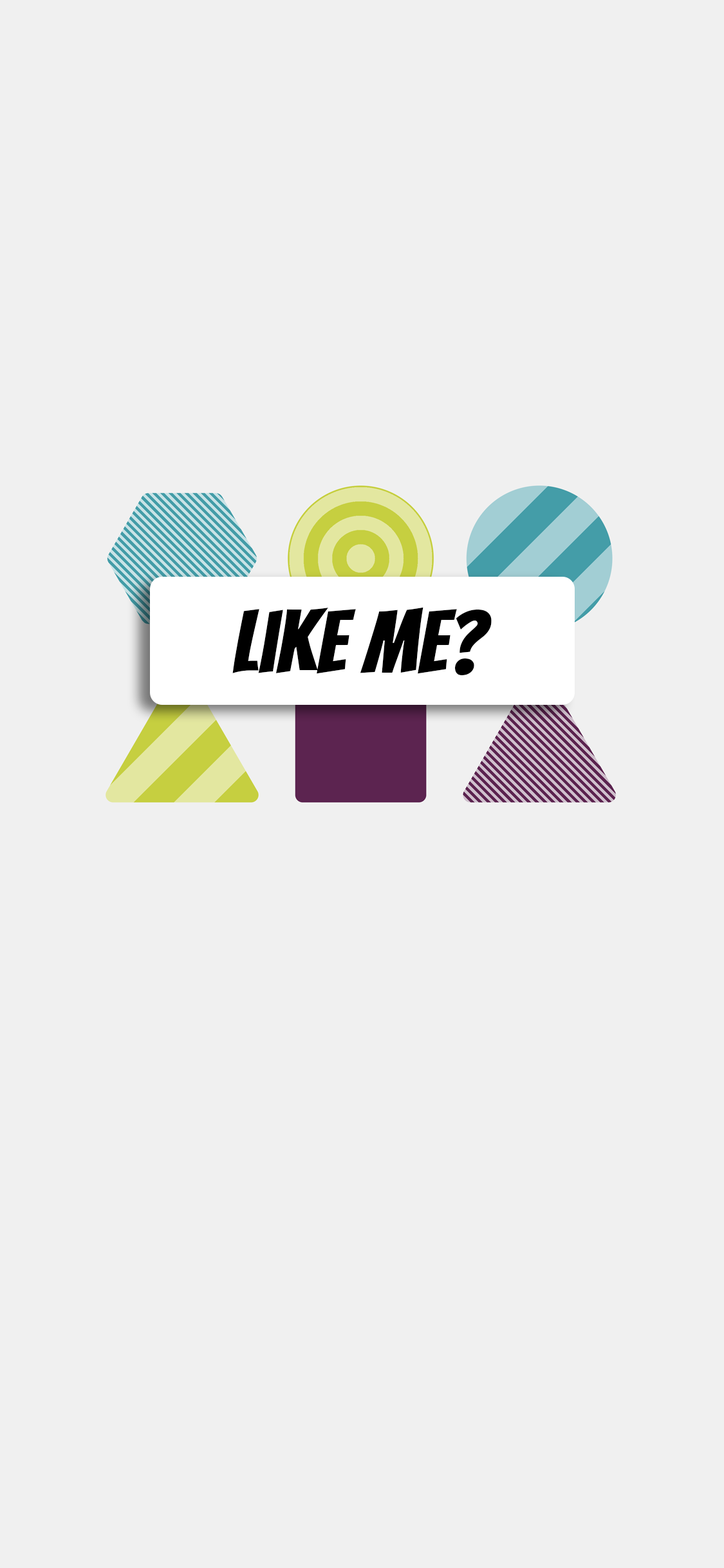
<style>
.page{position:relative;width:724px;height:1568px;background:#f0f0f0}
.page>*{position:absolute;margin:0}
.t1{font:87.3px "Bangers-Regular";color:#000000}
</style>
<div class="page">
<p class="t1" style="left:232px;top:607px;width:260px;height:68px">Like Me?</p>
</div>
